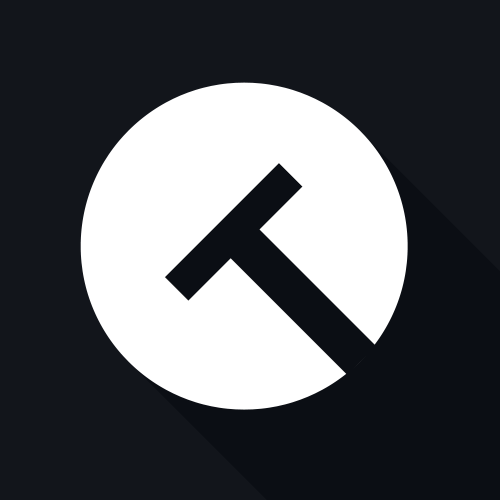
<style>
.page{position:relative;width:500px;height:500px;background:#12151b}
.page>*{position:absolute;margin:0}
.t1{font:278.6px "Roboto-Bold";color:#0b0e14}
</style>
<div class="page">
<p class="t1" style="left:164px;top:163px;width:213px;height:212px;rotate:-45deg">T</p>
</div>
